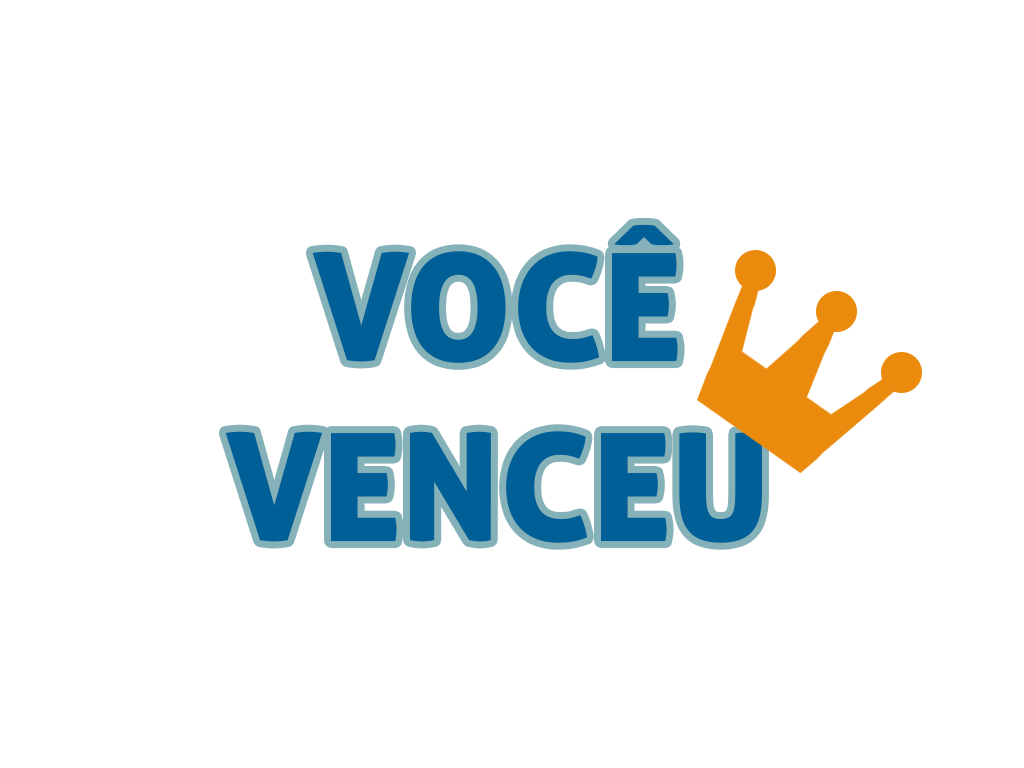
<style>
.page{position:relative;width:1024px;height:768px;background:#ffffff}
.page>*{position:absolute;margin:0}
.t1{font:150px "AllerDisplay";color:#005f96}
</style>
<div class="page">
<p class="t1" style="left:225px;top:224px;width:537px;height:319px;text-align:center">VOCÊ<br>VENCEU</p>
</div>
